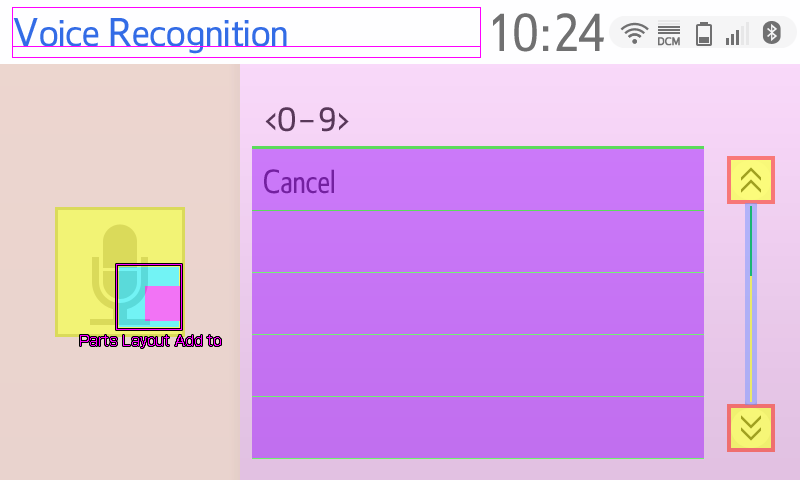
<style>
.page{position:relative;width:800px;height:480px}
.page>*{position:absolute;margin:0}
.t1{font:48px "Tfont1502_T2S";letter-spacing:0.05em;color:#707071}
.t2{font:36px "Tfont1502_T1S";color:#336ce6}
.t3{font:30px "Tfont1502_T1S";color:#583859}
.t4{font:30px "Tfont1502_T2S";color:#7320a0}
.t5{font:14px "ShinGoPro-Regular";color:#ff00ff}
</style>
<div class="page">
<p class="t1" style="left:493px;top:13px;width:111px;height:39px">10:24</p>
<p class="t2" style="left:13px;top:18px;width:274px;height:36px">Voice Recognition</p>
<p class="t3" style="left:265px;top:107px;width:84px;height:25px">&lt;0-9&gt;</p>
<p class="t4" style="left:264px;top:169px;width:70px;height:25px">Cancel</p>
<p class="t5" style="left:80px;top:335px;width:141px;height:13px">Parts Layout Add to</p>
</div>
